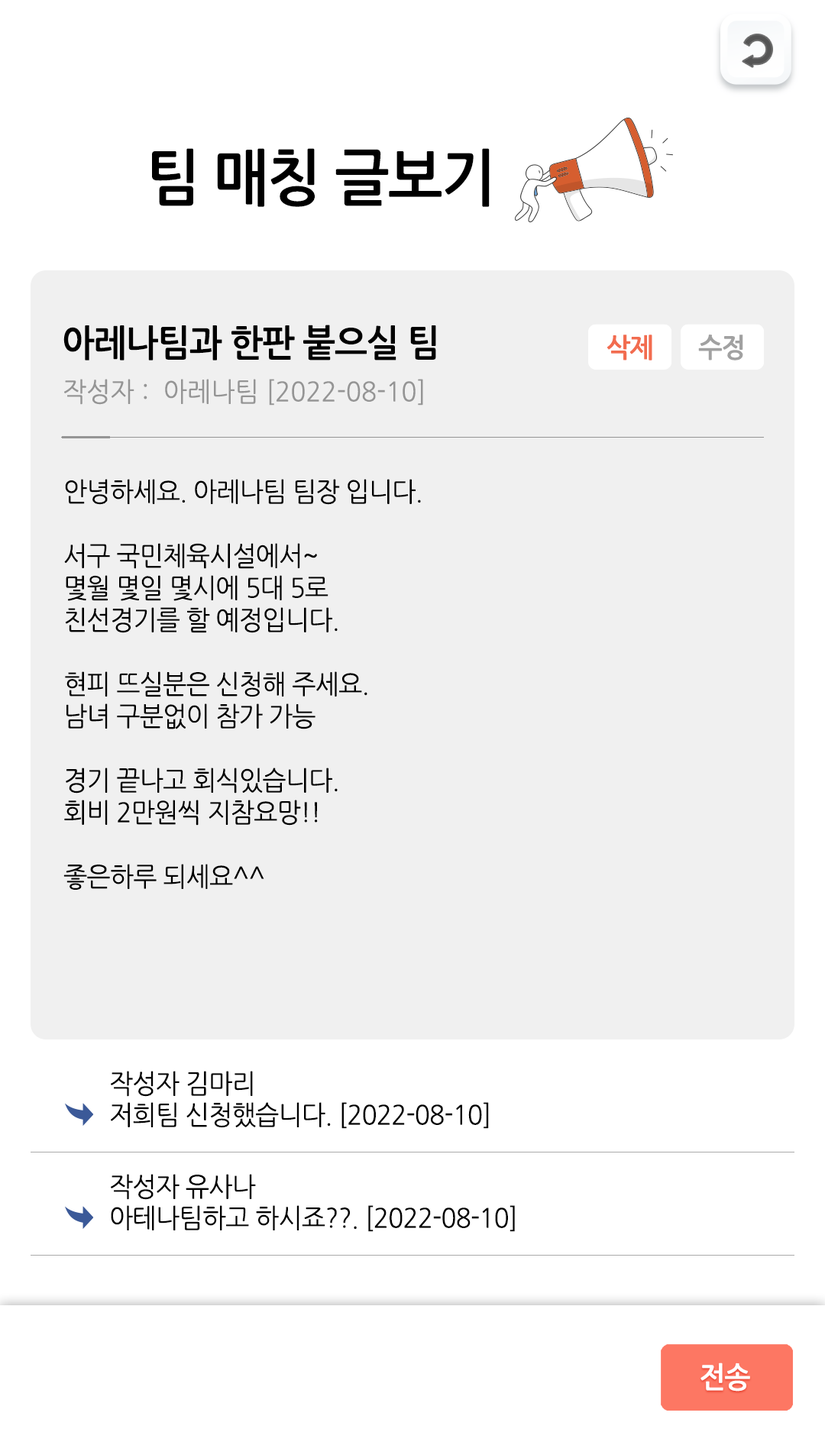
<style>
.page{position:relative;width:825px;height:1445px;background:#ffffff}
.page>*{position:absolute;margin:0}
.t1{font:61.1px "NanumGothicBold";letter-spacing:-0.025em;color:#000000;scale:0.95 1}
.t2{font:36.7px "NanumGothicBold";letter-spacing:-0.025em;color:#000000;scale:0.95 1}
.t3{font:26.7px "NanumGothicBold";letter-spacing:-0.025em;color:#f26c4f;scale:0.95 1}
.t4{font:26.7px "NanumGothicBold";letter-spacing:-0.025em;color:#a1a1a1;scale:0.95 1}
.t5{font:26.7px "NanumGothic";color:#959595;scale:0.95 1}
.t6{font:26.7px "NanumGothic";letter-spacing:-0.025em;color:#000000;scale:0.95 1}
.t7{font:29px "NanumGothicBold";letter-spacing:-0.025em;color:#ffffff;scale:0.95 1}
</style>
<div class="page">
<p class="t1" style="left:152px;top:148px;width:338px;height:59px">팀 매칭 글보기</p>
<p class="t2" style="left:63px;top:325px;width:373px;height:36px">아레나팀과 한판 붙으실 팀</p>
<p class="t3" style="left:607px;top:335px;width:136px;height:26px">삭제 <span class="t4">      수정</span></p>
<p class="t5" style="left:64px;top:379px;width:359px;height:27px">작성자 :  아레나팀 [2022-08-10]</p>
<p class="t6" style="left:63px;top:479px;width:358px;height:411px">안녕하세요. 아레나팀 팀장 입니다.<br><br>서구 국민체육시설에서~<br>몇월 몇일 몇시에 5대 5로<br>친선경기를 할 예정입니다.<br><br>현피 뜨실분은 신청해 주세요.<br>남녀 구분없이 참가 가능<br><br>경기 끝나고 회식있습니다.<br>회비 2만원씩 지참요망!! <br><br>좋은하루 되세요^^</p>
<p class="t6" style="left:111px;top:1071px;width:142px;height:26px">작성자 김마리</p>
<p class="t6" style="left:111px;top:1102px;width:378px;height:27px">저희팀 신청했습니다. [2022-08-10]</p>
<p class="t6" style="left:111px;top:1174px;width:145px;height:26px">작성자 유사나</p>
<p class="t6" style="left:111px;top:1205px;width:404px;height:27px">아테나팀하고 하시죠??. [2022-08-10]</p>
<p class="t7" style="left:701px;top:1363px;width:49px;height:29px">전송</p>
</div>
